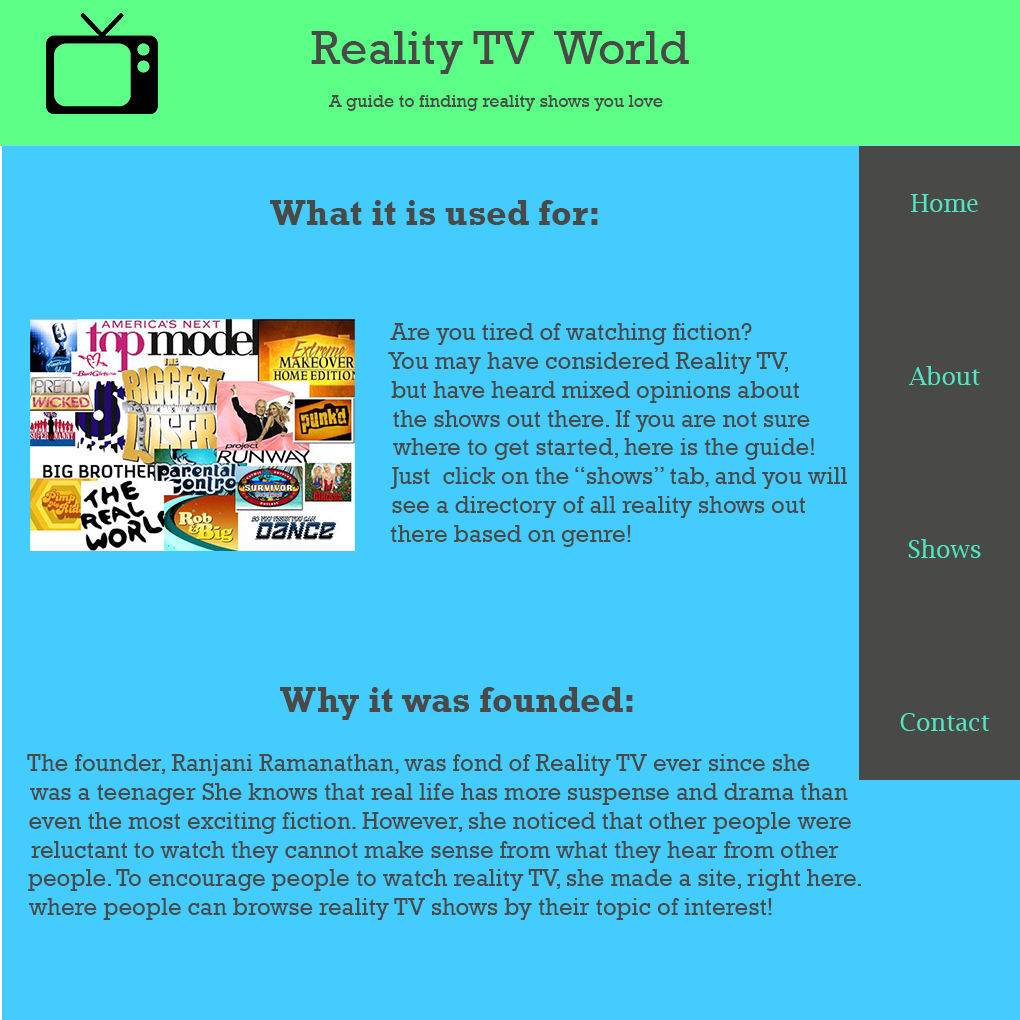
<style>
.page{position:relative;width:1020px;height:1020px;background:#44ccff}
.page>*{position:absolute;margin:0}
.t1{font:18px "Rockwell";color:#494947}
.t2{font:48px "Rockwell";color:#494947}
.t3{font:24px "LucidaBright";color:#50e6c2}
.t4{font:36px "Rockwell-Bold";color:#494947}
.t5{font:24px "Rockwell-Bold";color:#494947}
.t6{font:24px "Rockwell";color:#494947}
</style>
<div class="page">
<p class="t1" style="left:311px;top:31px;width:378px;height:80px"><span class="t2">Reality TV  World<br></span><br>    A guide to finding reality shows you love</p>
<p class="t3" style="left:900px;top:194px;width:90px;height:537px;text-align:center">Home<br><br><br><br><br><br>About<br><br><br><br><br><br>Shows<br><br><br><br><br><br>Contact</p>
<p class="t4" style="left:270px;top:200px;width:328px;height:25px"><span class="t5">                                                                    </span> What it is used for:</p>
<p class="t6" style="left:388px;top:323px;width:459px;height:224px;text-align:center">Are you tired of watching fiction?<br>                           You may have considered Reality TV, <br>                             but have heard mixed opinions about <br>                               the shows out there. If you are not sure <br>                               where to get started, here is the guide!<br>                                     Just  click on the “shows” tab, and you will <br>                              see a directory of all reality shows out <br>there based on genre!</p>
<p class="t4" style="left:280px;top:687px;width:353px;height:33px">Why it was founded:</p>
</div>
